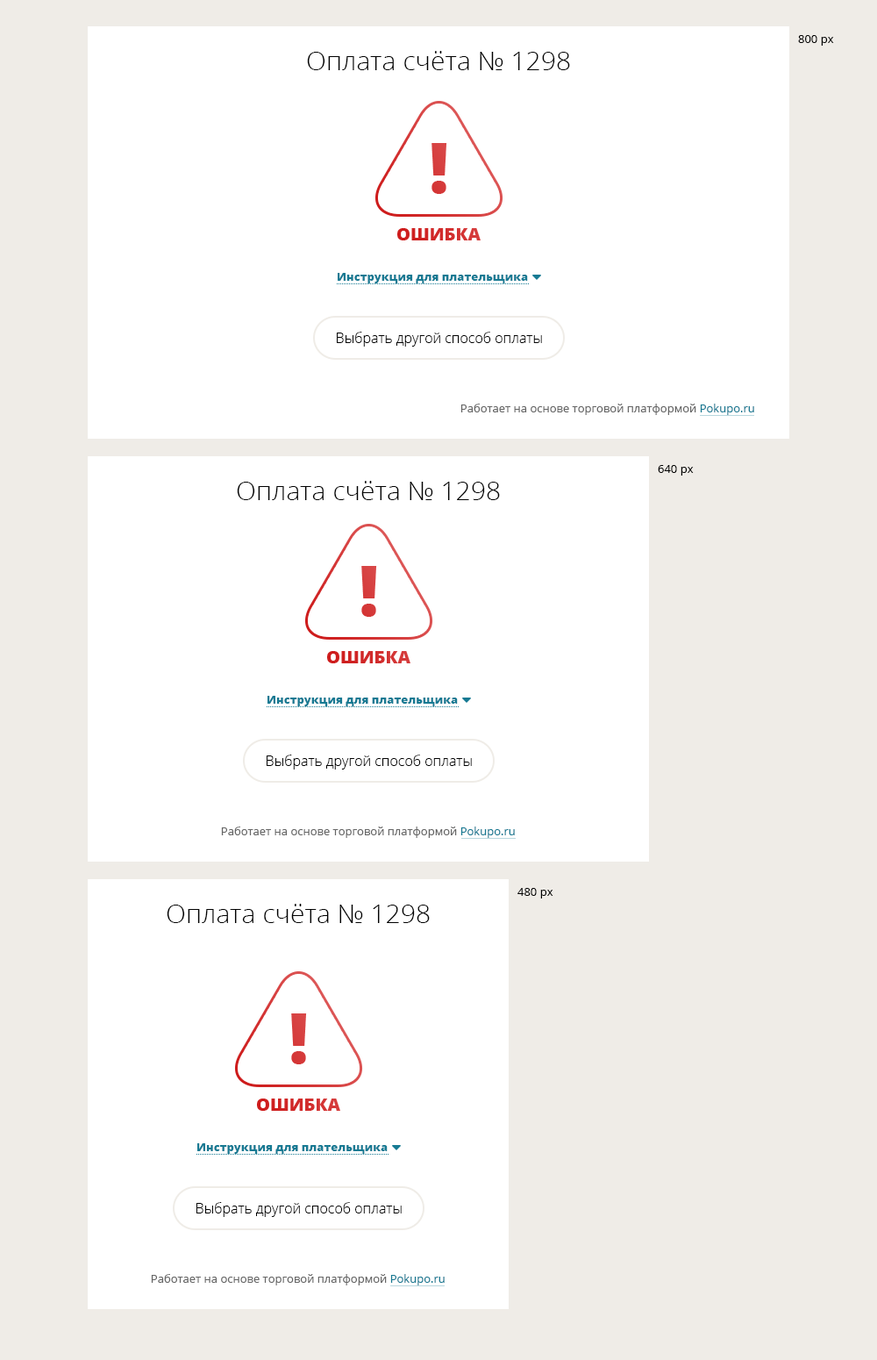
<style>
.page{position:relative;width:877px;height:1360px;background:#ffffff}
.page>*{position:absolute;margin:0}
.t1{font:11.4px "OpenSans";color:#000000}
.t2{font:26.3px "OpenSans-Light";color:#000000}
.t3{font:11.4px "OpenSans-Extrabold";color:#177a93}
.t4{font:14px "OpenSans-Light";color:#000000}
.t5{font:11.4px "OpenSans";color:#666666}
.t6{font:11.4px "OpenSans";color:#177a93}
</style>
<div class="page">
<p class="t1" style="left:798px;top:35px;width:36px;height:11px">800 px</p>
<p class="t2" style="left:307px;top:51px;width:263px;height:19px">Оплата счёта № 1298</p>
<p class="t3" style="left:338px;top:273px;width:190px;height:10px">Инструкция для плательщика</p>
<p class="t4" style="left:337px;top:332px;width:205px;height:14px">Выбрать другой способ оплаты</p>
<p class="t5" style="left:460px;top:403px;width:294px;height:12px">Работает на основе торговой платформой <span class="t6">Pokupo.ru</span></p>
<p class="t1" style="left:658px;top:465px;width:36px;height:10px">640 px</p>
<p class="t2" style="left:237px;top:481px;width:263px;height:19px">Оплата счёта № 1298</p>
<p class="t3" style="left:268px;top:696px;width:190px;height:10px">Инструкция для плательщика</p>
<p class="t4" style="left:267px;top:754px;width:205px;height:15px">Выбрать другой способ оплаты</p>
<p class="t5" style="left:221px;top:826px;width:294px;height:12px">Работает на основе торговой платформой <span class="t6">Pokupo.ru</span></p>
<p class="t1" style="left:517px;top:888px;width:36px;height:10px">480 px</p>
<p class="t2" style="left:167px;top:903px;width:263px;height:20px">Оплата счёта № 1298</p>
<p class="t3" style="left:197px;top:1143px;width:191px;height:10px">Инструкция для плательщика</p>
<p class="t4" style="left:196px;top:1202px;width:206px;height:15px">Выбрать другой способ оплаты</p>
<p class="t5" style="left:151px;top:1274px;width:294px;height:11px">Работает на основе торговой платформой <span class="t6">Pokupo.ru</span></p>
</div>
